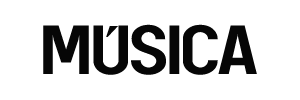
<style>
.page{position:relative;width:300px;height:100px;background:#ffffff}
.page>*{position:absolute;margin:0}
.t1{font:64.8px "aAreaKilometer50";letter-spacing:-0.025em;color:#060606;scale:1.11 1}
.t2{font:64.8px "TimesNewRomanPSMT";letter-spacing:-0.025em;color:#060606;scale:1.11 1}
</style>
<div class="page">
<p class="t1" style="left:43px;top:24px;width:214px;height:51px">MUSICA</p>
<p class="t2" style="left:106px;top:26px;width:12px;height:11px">´</p>
</div>
